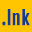
<style>
.page{position:relative;width:32px;height:32px;background:#ffc600}
.page>*{position:absolute;margin:0}
.t1{font:18px "FjallaOne-Regular";color:#133c8f;font-weight:bold}
</style>
<div class="page">
<p class="t1" style="left:2px;top:9px;width:28px;height:17px">.lnk</p>
</div>
